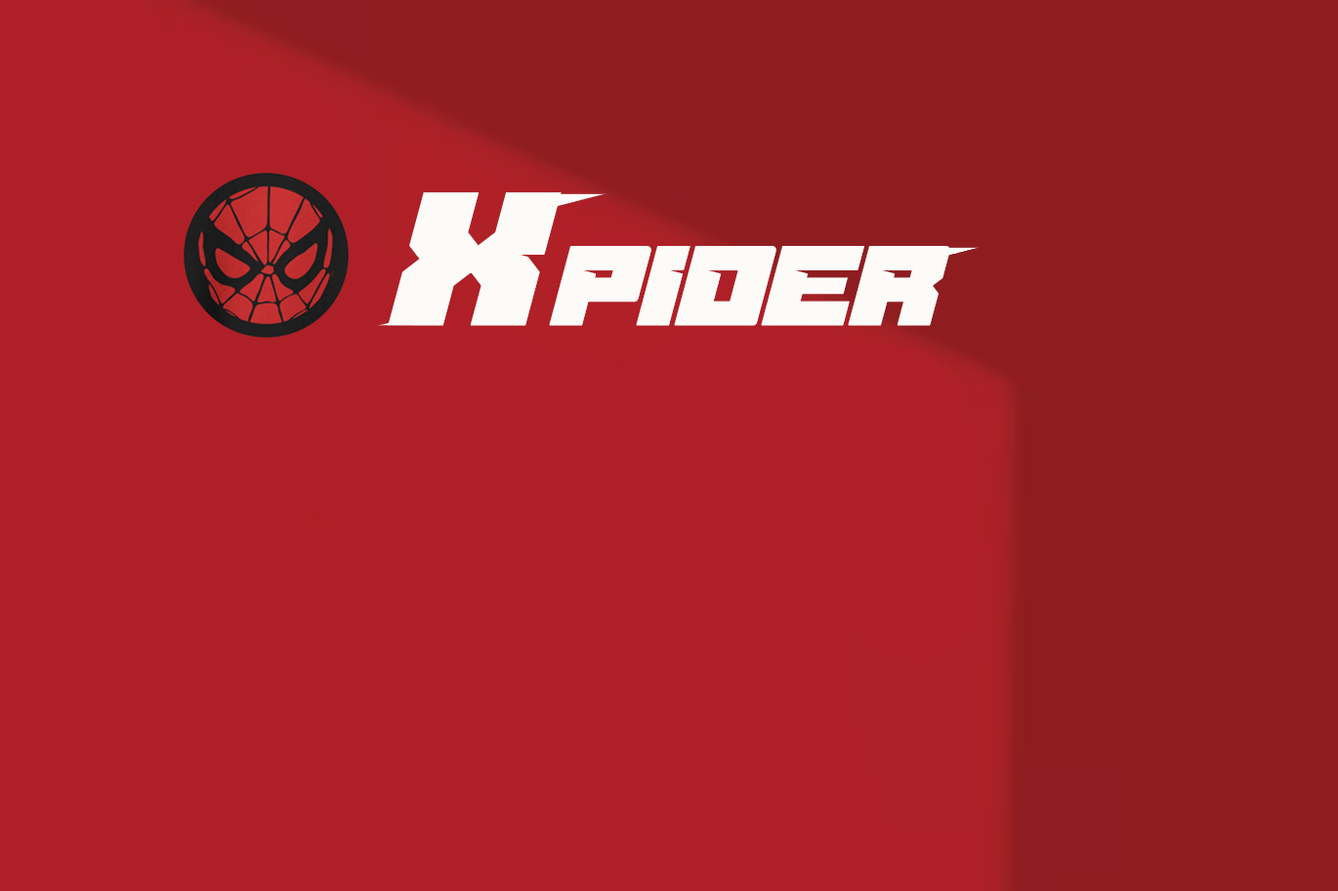
<style>
.page{position:relative;width:1338px;height:891px;background:#af1f27}
.page>*{position:absolute;margin:0}
.t1{font:96.7px "MaskedHero";letter-spacing:-0.04em;color:#fcfbf8}
.t2{font:162.1px "MaskedHero";letter-spacing:-0.16em;color:#fcfbf8}
</style>
<div class="page">
<p class="t1" style="left:388px;top:192px;width:562px;height:133px"><span class="t2">x</span>pider</p>
</div>
